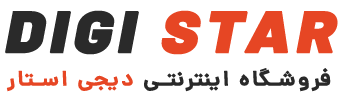
<style>
.page{position:relative;width:339px;height:98px;background:#ffffff}
.page>*{position:absolute;margin:0}
.t1{font:57.5px "dana-black";letter-spacing:0.08em;color:#2a2a2a;font-weight:bold;font-style:italic;scale:1.08 1}
.t2{font:57.5px "dana-black";letter-spacing:0.08em;color:#e64624;font-weight:bold;font-style:italic;scale:1.08 1}
.t3{font:20.8px "dana-demibold";letter-spacing:0.08em;color:#292929;font-weight:bold;scale:1.08 1}
.t4{font:20.8px "dana-demibold";letter-spacing:0.08em;color:#e64624;font-weight:bold;scale:1.08 1}
</style>
<div class="page">
<p class="t1" style="left:5px;top:10px;width:333px;height:45px">DIGI<span class="t2"> STAR</span></p>
<p class="t3" style="left:6px;top:68px;width:325px;height:24px">فروشگاه اینترنتی <span class="t4">دیجی استار</span></p>
</div>
